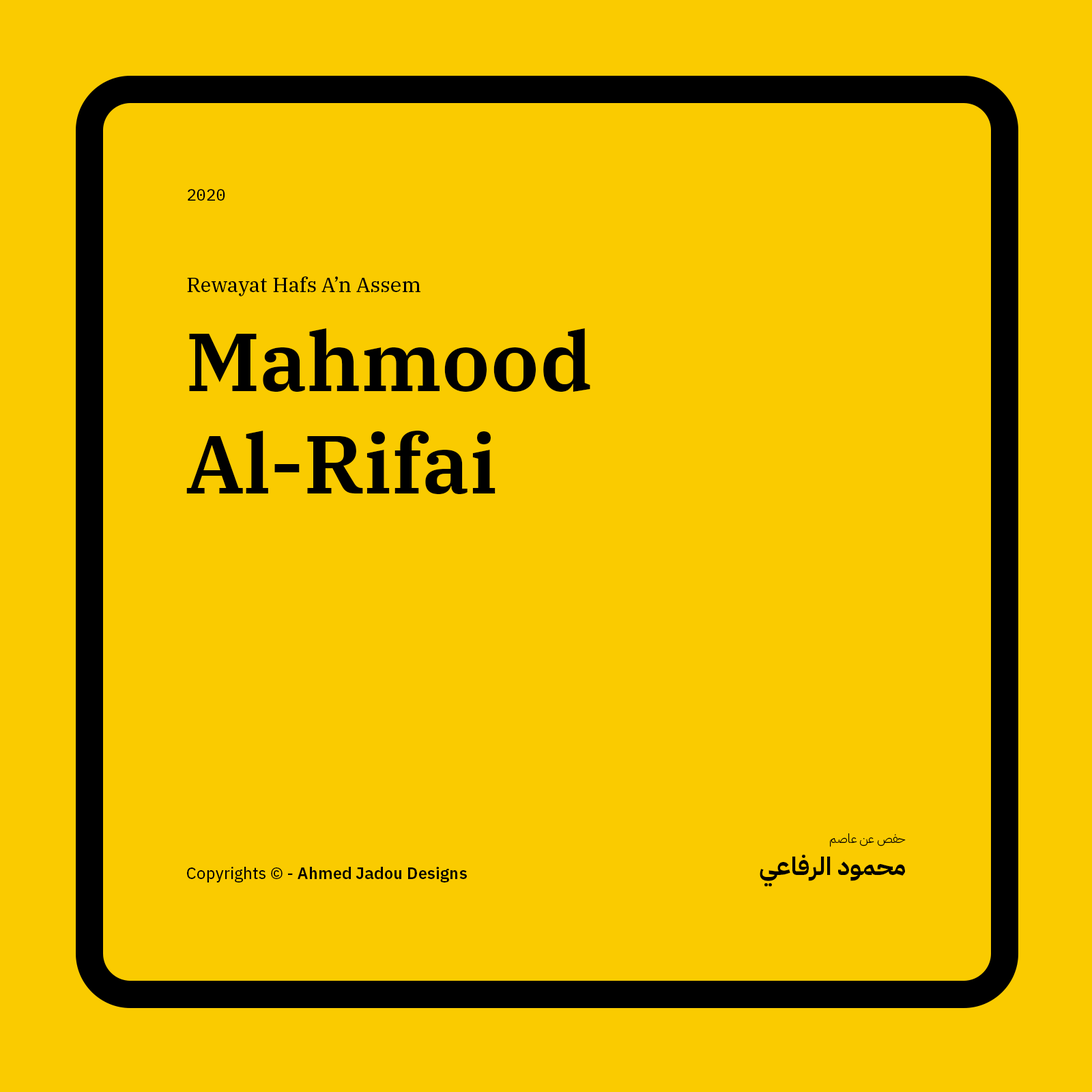
<style>
.page{position:relative;width:1092px;height:1092px;background:#facb00}
.page>*{position:absolute;margin:0}
.t1{font:16.4px "IBMPlexMono-Text";color:#000000}
.t2{font:20.5px "IBMPlexSerif-Text";color:#000000}
.t3{font:81.9px/102.7px "IBMPlexSerif-SemiBold";color:#000000}
.t4{font:12.3px "IBMPlexArabic-Light";color:#000000}
.t5{font:24.6px "IBMPlexArabic-Bold";color:#000000}
.t6{font:16.4px "IBMPlexSans-SemiBold";color:#000000}
.t7{font:16.4px "IBMPlexSans-Text";color:#000000}
</style>
<div class="page">
<p class="t1" style="left:188px;top:189px;width:37px;height:12px">2020</p>
<p class="t2" style="left:187px;top:276px;width:233px;height:20px">Rewayat Hafs A’n Assem</p>
<p class="t3" style="left:186px;top:328px;width:404px;height:166px">Mahmood Al-Rifai</p>
<p class="t4" style="left:830px;top:833px;width:76px;height:14px">حفص عن عاصم</p>
<p class="t5" style="left:760px;top:854px;width:145px;height:33px">محمود الرفاعي</p>
<p class="t6" style="left:187px;top:867px;width:280px;height:15px"><span class="t7">Copyrights © - </span>Ahmed Jadou Designs</p>
</div>
